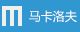
<style>
.page{position:relative;width:80px;height:32px;background:#3097d1}
.page>*{position:absolute;margin:0}
.t1{font:12px "MicrosoftYaHei";color:#ffffff}
</style>
<div class="page">
<p class="t1" style="left:29px;top:10px;width:48px;height:13px">马卡洛夫</p>
</div>
